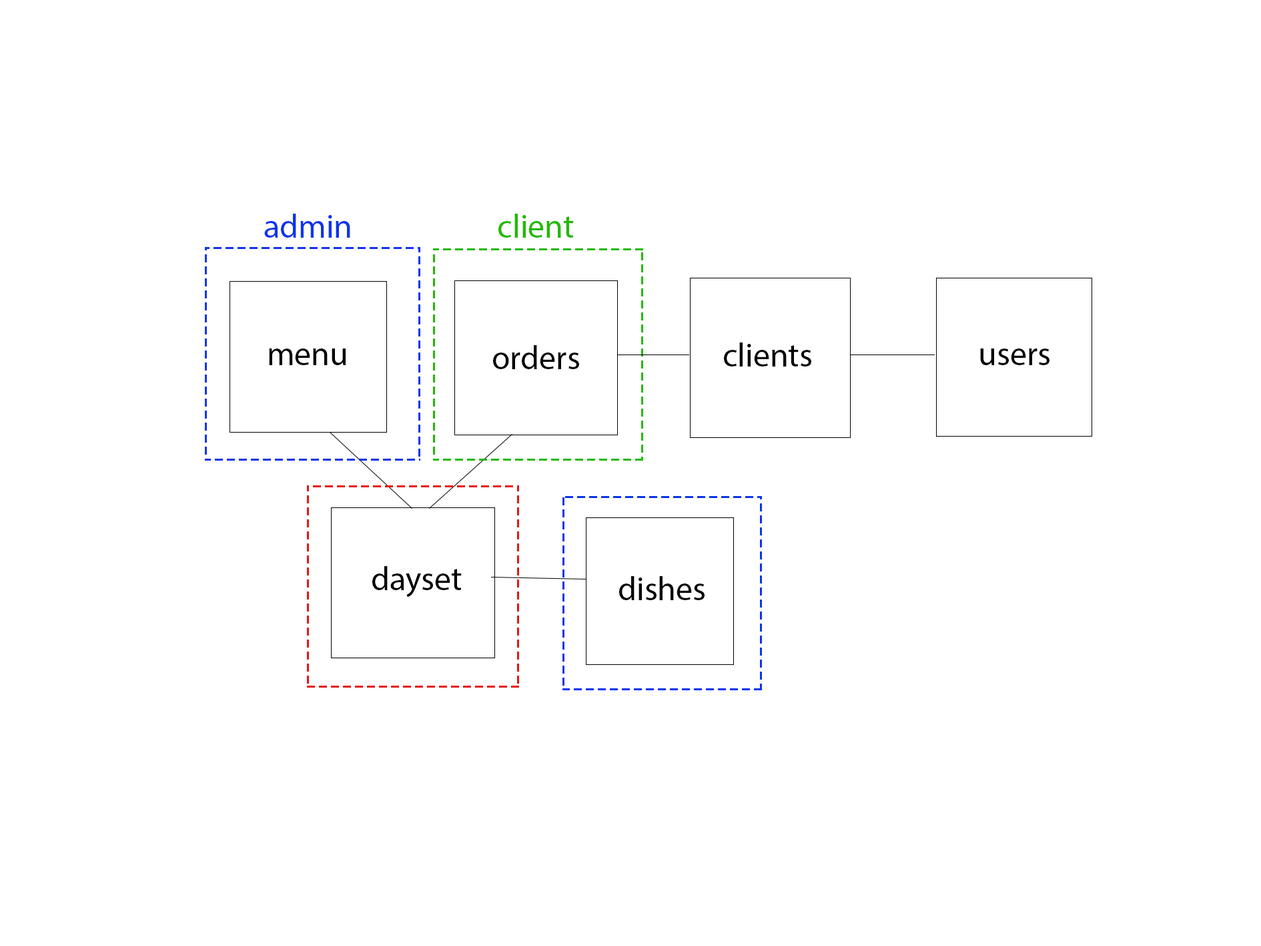
<style>
.page{position:relative;width:1261px;height:946px;background:#ffffff}
.page>*{position:absolute;margin:0}
.t1{font:33.4px "MyriadPro-Regular";color:#0b34ed}
.t2{font:33.4px "MyriadPro-Regular";color:#22b900}
.t3{font:33.4px "MyriadPro-Regular";color:#000000}
</style>
<div class="page">
<p class="t1" style="left:264px;top:214px;width:86px;height:24px">admin</p>
<p class="t2" style="left:498px;top:214px;width:76px;height:24px">client</p>
<p class="t3" style="left:269px;top:348px;width:77px;height:17px">menu</p>
<p class="t3" style="left:493px;top:345px;width:86px;height:24px">orders</p>
<p class="t3" style="left:724px;top:342px;width:87px;height:24px">clients</p>
<p class="t3" style="left:980px;top:348px;width:70px;height:17px">users</p>
<p class="t3" style="left:372px;top:566px;width:90px;height:31px">dayset</p>
<p class="t3" style="left:619px;top:576px;width:86px;height:24px">dishes</p>
</div>
